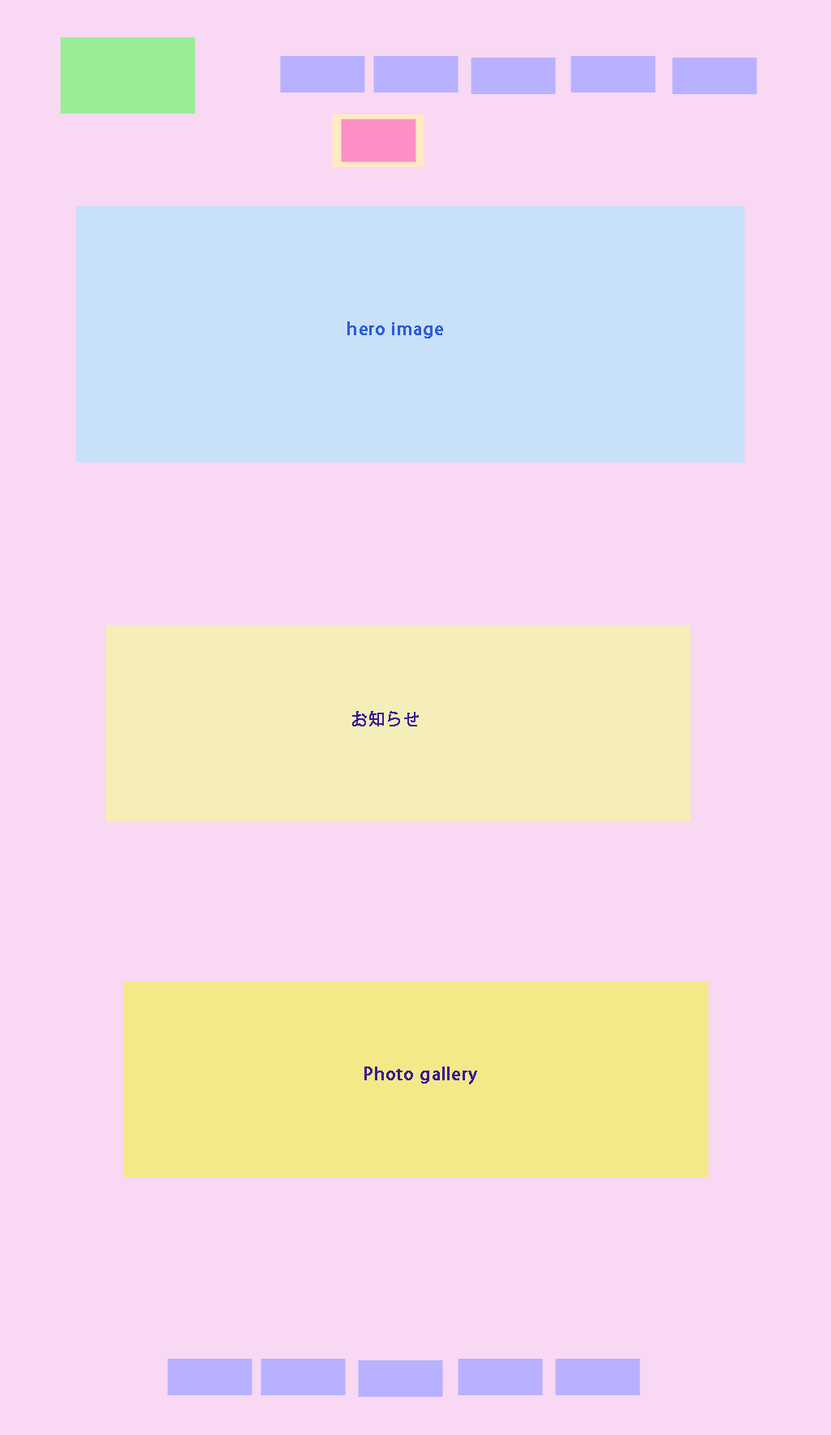
<style>
.page{position:relative;width:831px;height:1435px;background:#f9d8f3}
.page>*{position:absolute;margin:0}
.t1{font:16.2px "KozGoPr6N-Regular";letter-spacing:0.04em;color:#2c5cd7;font-weight:bold}
.t2{font:16.2px "KozGoPr6N-Regular";letter-spacing:0.04em;color:#391c96;font-weight:bold}
</style>
<div class="page">
<p class="t1" style="left:347px;top:321px;width:96px;height:17px">hero image</p>
<p class="t2" style="left:352px;top:711px;width:67px;height:15px">お知らせ</p>
<p class="t2" style="left:364px;top:1066px;width:113px;height:18px">Photo gallery</p>
</div>
